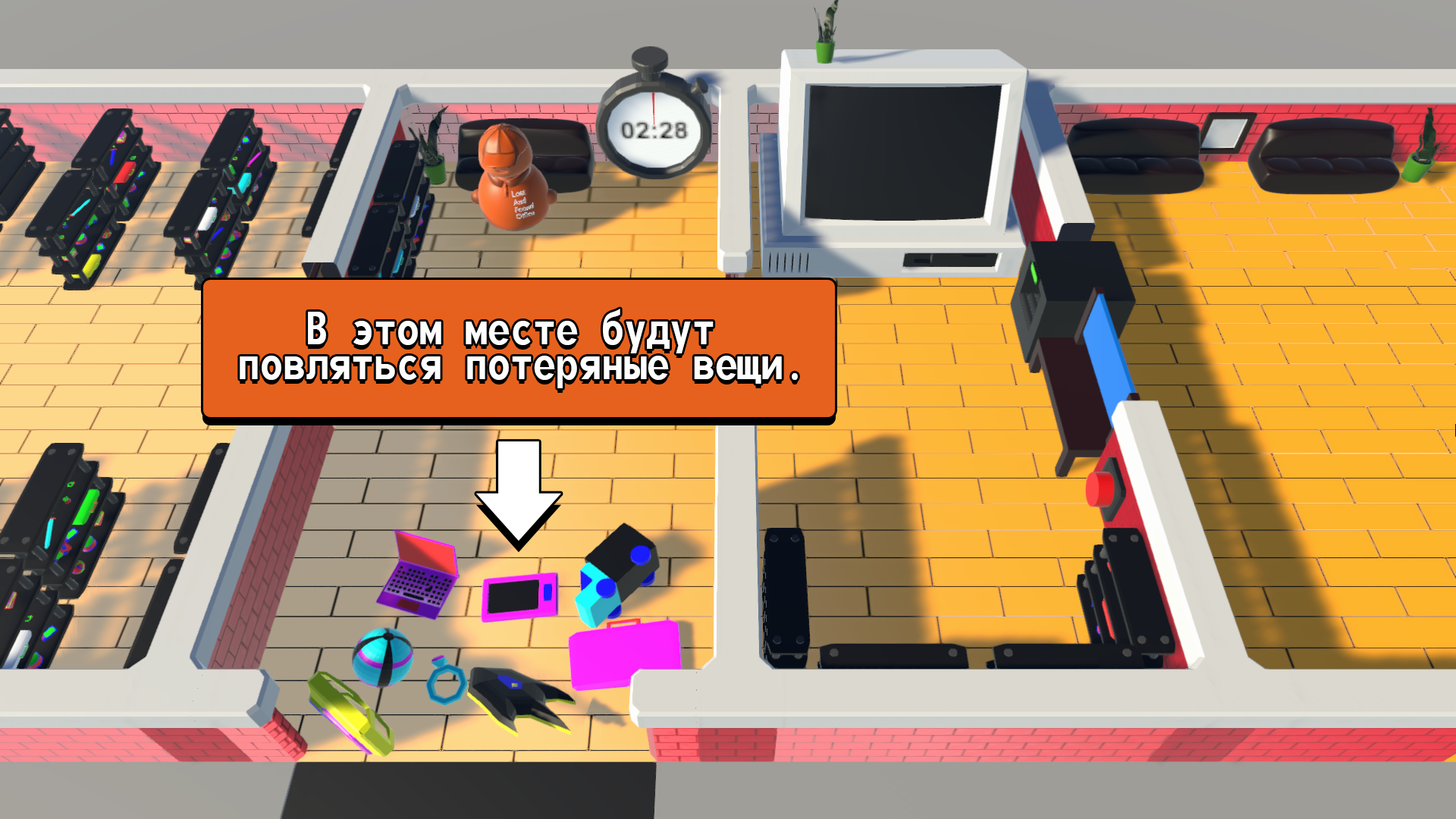
<style>
.page{position:relative;width:1456px;height:819px}
.page>*{position:absolute;margin:0}
.t1{font:56.9px/34.8px "MonofontoRUSBYMelman-Regular";color:#fdfefd}
</style>
<div class="page">
<p class="t1" style="left:240px;top:309px;width:558px;height:79px;text-align:center">В этом месте будут<br> повляться потеряные вещи.</p>
</div>
